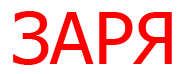
<style>
.page{position:relative;width:190px;height:74px;background:#ffffff}
.page>*{position:absolute;margin:0}
.t1{font:72px "Tahoma";color:#ff0000}
</style>
<div class="page">
<p class="t1" style="left:13px;top:11px;width:159px;height:54px">ЗАРЯ́</p>
</div>
